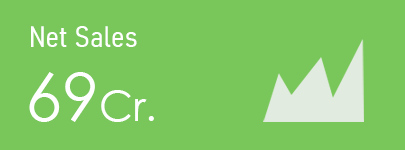
<style>
.page{position:relative;width:405px;height:150px;background:#79c75b}
.page>*{position:absolute;margin:0}
.t1{font:29.2px "Bahnschrift-SemiLightSemiCondensed";color:#ffffff}
.t2{font:41.7px "CenturyGothic";color:#ffffff}
.t3{font:66.7px "CenturyGothic";color:#ffffff}
</style>
<div class="page">
<p class="t1" style="left:31px;top:26px;width:106px;height:21px">Net Sales</p>
<p class="t2" style="left:29px;top:72px;width:125px;height:50px"><span class="t3">69</span>Cr.</p>
</div>
